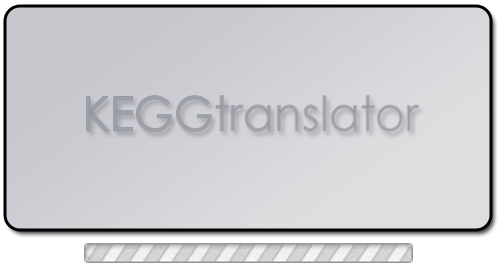
<style>
.page{position:relative;width:500px;height:280px}
.page>*{position:absolute;margin:0}
.t1{font:48px "CenturyGothic";color:#8f919d;scale:0.95 1}
</style>
<div class="page">
<p class="t1" style="left:86px;top:95px;width:334px;height:37px">KEGGtranslator</p>
</div>
